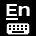
<style>
.page{position:relative;width:36px;height:36px;background:#000000}
.page>*{position:absolute;margin:0}
.t1{font:16px "Swiss721BT-BoldExtended";color:#ffffff}
.t2{font:18px "Swiss721BT-BoldExtended";color:#ffffff}
</style>
<div class="page">
<p class="t1" style="left:6px;top:4px;width:24px;height:12px">E<span class="t2">n</span></p>
</div>
